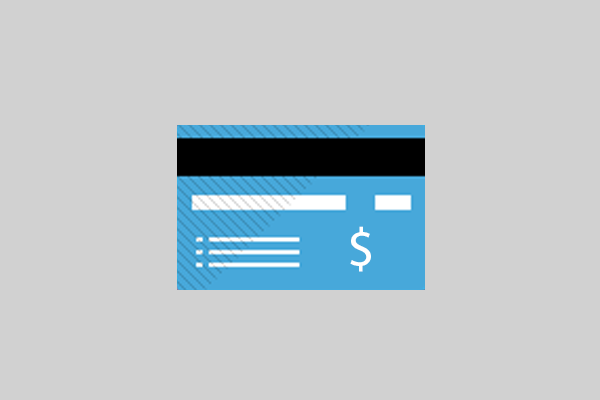
<style>
.page{position:relative;width:600px;height:400px;background:#d1d1d1}
.page>*{position:absolute;margin:0}
.t1{font:55px "MyriadPro-Regular";letter-spacing:-0.022em;color:#ffffff}
</style>
<div class="page">
<p class="t1" style="left:350px;top:226px;width:21px;height:46px">$</p>
</div>
